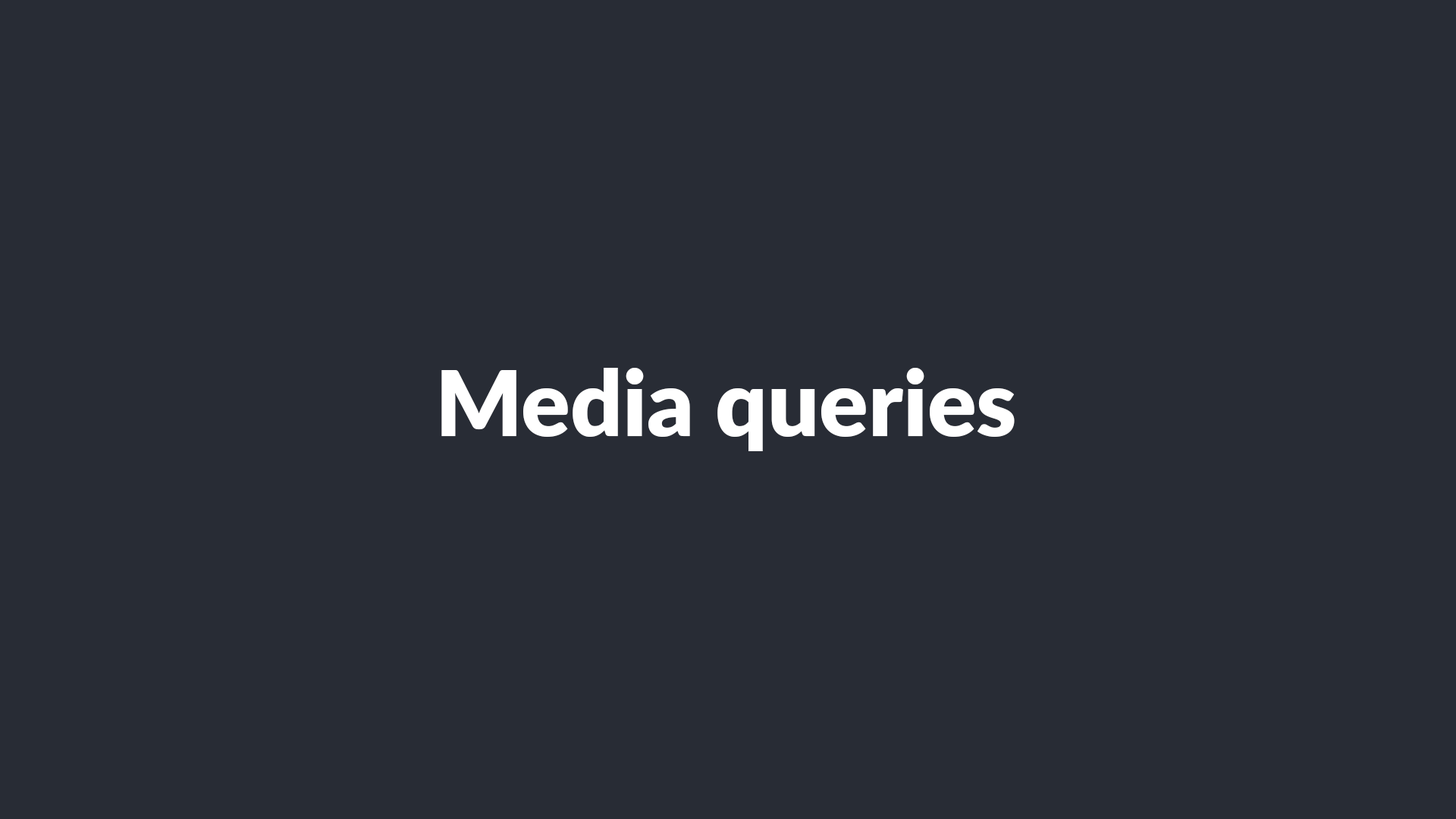
<style>
.page{position:relative;width:1456px;height:819px;background:#282c35}
.page>*{position:absolute;margin:0}
.t1{font:91px "Lato-ExtraBold";color:#ffffff}
</style>
<div class="page">
<p class="t1" style="left:441px;top:368px;width:574px;height:83px">Media queries</p>
</div>
